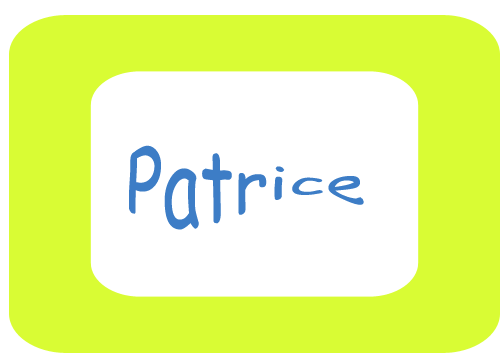
<style>
.page{position:relative;width:504px;height:360px;background:#d9fc34}
.page>*{position:absolute;margin:0}
.t1{font:72px "ComicSansMS";color:#3d7dc6}
.t2{font:72px "ComicSansMS";color:#d5ed0e}
</style>
<div class="page">
<p class="t1" style="left:129px;top:145px;width:235px;height:85px"><span class="t2">       </span>Patrice</p>
</div>
